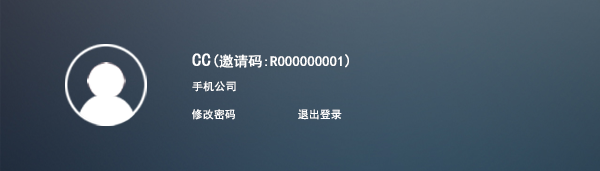
<style>
.page{position:relative;width:600px;height:171px}
.page>*{position:absolute;margin:0}
.t1{font:14px/30px "SimHei";color:#ffffff;font-weight:bold}
.t2{font:18px/30px "SimHei";color:#ffffff;font-weight:bold}
.t3{font:15.2px/30px "SimHei";color:#ffffff;font-weight:bold}
.t4{font:10.8px/30px "SimHei";color:#ffffff;font-weight:bold}
.t5{font:10.7px "SimHei";color:#ffffff;font-weight:bold}
</style>
<div class="page">
<p class="t1" style="left:192px;top:53px;width:157px;height:39px"><span class="t2">CC</span><span class="t3">(</span>邀请码:R000000001<span class="t3">)<br></span><span class="t4">手机公司</span></p>
<p class="t5" style="left:192px;top:109px;width:150px;height:11px">修改密码           退出登录</p>
</div>
